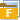
<style>
.page{position:relative;width:20px;height:20px;background:#f4b209}
.page>*{position:absolute;margin:0}
.t1{font:11px "SegoeUI-Bold";color:#fefeff;scale:1.2 1}
</style>
<div class="page">
<p class="t1" style="left:6px;top:9px;width:6px;height:8px">F</p>
</div>
